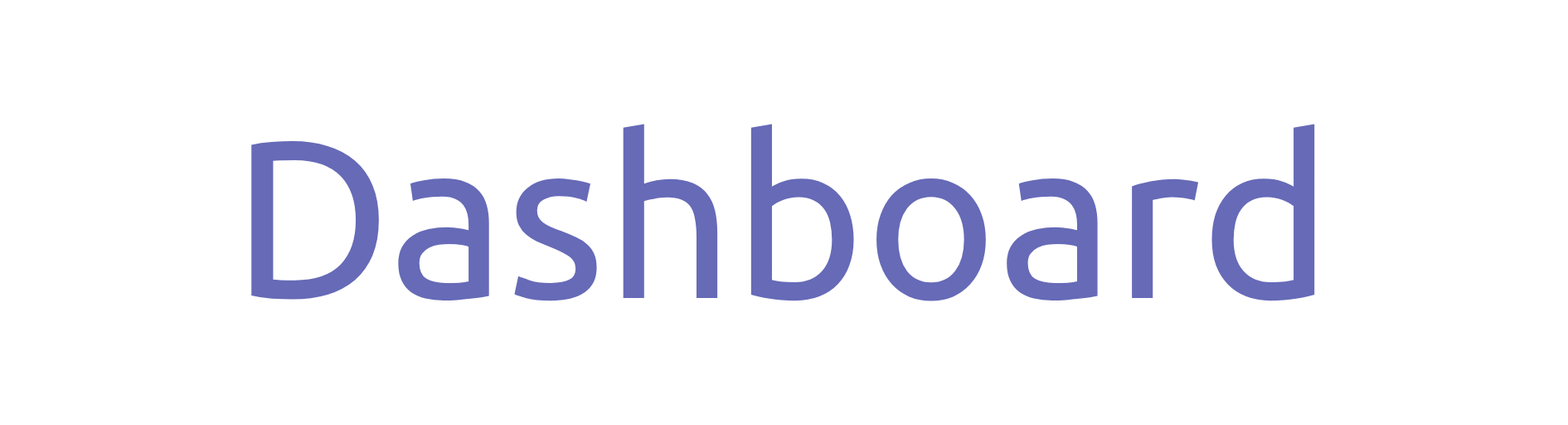
<style>
.page{position:relative;width:1568px;height:425px;background:#ffffff}
.page>*{position:absolute;margin:0}
.t1{font:223.9px "Ubuntu-Regular";color:#666ab7}
</style>
<div class="page">
<p class="t1" style="left:251px;top:124px;width:1064px;height:177px">Dashboard</p>
</div>
